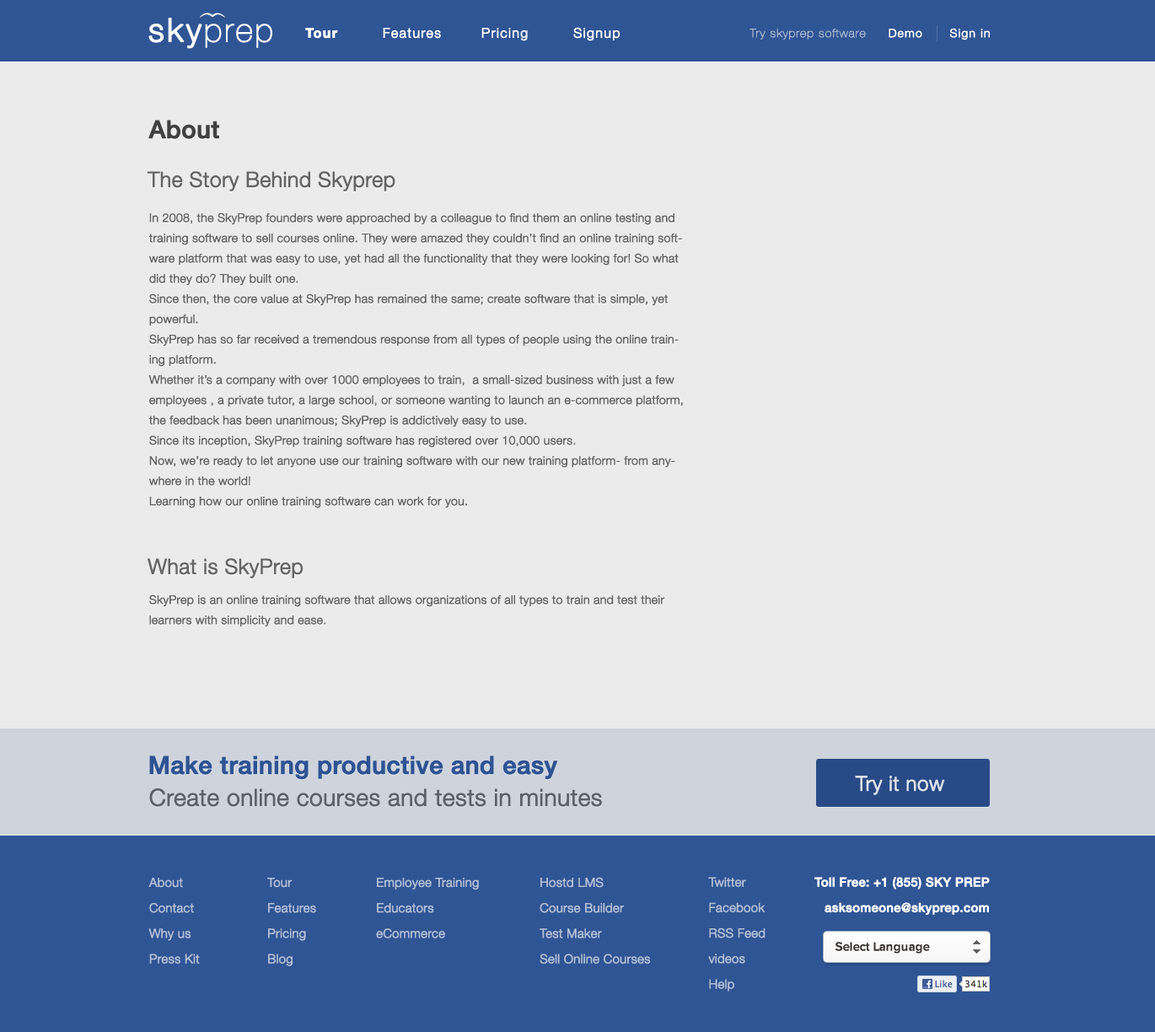
<style>
.page{position:relative;width:1155px;height:1032px;background:#ebebeb}
.page>*{position:absolute;margin:0}
.t1{font:32.8px "HelveticaNeue-UltraLight";letter-spacing:0.06em;color:#ffffff;font-weight:bold}
.t2{font:32.8px "HelveticaNeue-Light";letter-spacing:0.06em;color:#ffffff;font-weight:bold}
.t3{font:13.4px "HelveticaNeue-Light";letter-spacing:0.06em;color:#ffffff;font-weight:bold}
.t4{font:13.4px "HelveticaNeue-Bold";letter-spacing:0.06em;color:#ffffff;font-weight:bold}
.t5{font:11.5px "HelveticaNeue-UltraLight";letter-spacing:0.06em;color:#bac5d9;font-weight:bold}
.t6{font:11.5px "HelveticaNeue-Light";letter-spacing:0.06em;color:#ffffff;font-weight:bold}
.t7{font:24.5px "HelveticaNeue-Medium";color:#414141;font-weight:bold}
.t8{font:20.9px "HelveticaNeue-Light";color:#656565;font-weight:bold}
.t9{font:11.8px/20.2px "HelveticaNeue-Light";color:#656565;font-weight:bold}
.t10{font:24.5px "HelveticaNeue-Medium";color:#2e5393;font-weight:bold}
.t11{font:20.2px "HelveticaNeue-Light";color:#dfe4ed;font-weight:bold}
.t12{font:23.3px "HelveticaNeue-Light";color:#5c616a;font-weight:bold}
.t13{font:12.5px/25.5px "HelveticaNeue-Light";color:#b4c0d6;font-weight:bold}
.t14{font:12.5px/25.5px "HelveticaNeue-Medium";color:#ffffff;font-weight:bold}
.t15{font:12.6px "ProximaNova-Semibold";color:#404040}
</style>
<div class="page">
<p class="t1" style="left:148px;top:18px;width:124px;height:31px"><span class="t2">sky</span>prep</p>
<p class="t3" style="left:305px;top:27px;width:316px;height:14px"><span class="t4">Tour         </span>Features        Pricing         Signup</p>
<p class="t5" style="left:750px;top:29px;width:116px;height:11px">Try skyprep software</p>
<p class="t6" style="left:889px;top:28px;width:101px;height:12px">Demo Sign in</p>
<p class="t7" style="left:148px;top:120px;width:71px;height:19px">About</p>
<p class="t8" style="left:147px;top:171px;width:248px;height:20px">The Story Behind Skyprep</p>
<p class="t9" style="left:148px;top:213px;width:535px;height:295px">In 2008, the SkyPrep founders were approached by a colleague to find them an online testing and training software to sell courses online. They were amazed they couldn’t find an online training software platform that was easy to use, yet had all the functionality that they were looking for! So what did they do? They built one.<br>Since then, the core value at SkyPrep has remained the same; create software that is simple, yet powerful.<br>SkyPrep has so far received a tremendous response from all types of people using the online training platform.<br>Whether it’s a company with over 1000 employees to train,  a small-sized business with just a few employees , a private tutor, a large school, or someone wanting to launch an e-commerce platform, the feedback has been unanimous; SkyPrep is addictively easy to use.<br>Since its inception, SkyPrep training software has registered over 10,000 users.<br>Now, we’re ready to let anyone use our training software with our new training platform- from anywhere in the world!<br>Learning how our online training software can work for you.</p>
<p class="t8" style="left:148px;top:558px;width:156px;height:20px">What is SkyPrep</p>
<p class="t9" style="left:149px;top:595px;width:516px;height:32px">SkyPrep is an online training software that allows organizations of all types to train and test their learners with simplicity and ease.</p>
<p class="t10" style="left:149px;top:756px;width:409px;height:24px">Make training productive and easy</p>
<p class="t11" style="left:855px;top:776px;width:90px;height:19px">Try it now</p>
<p class="t12" style="left:149px;top:788px;width:453px;height:19px">Create online courses and tests in minutes</p>
<p class="t13" style="left:148px;top:878px;width:52px;height:86px">About<br>Contact<br>Why us<br>Press Kit</p>
<p class="t13" style="left:267px;top:878px;width:49px;height:88px">Tour<br>Features<br>Pricing<br>Blog</p>
<p class="t13" style="left:376px;top:878px;width:103px;height:61px">Employee Training<br>Educators<br>eCommerce</p>
<p class="t13" style="left:540px;top:877px;width:111px;height:87px">Hostd LMS<br>Course Builder<br>Test Maker<br>Sell Online Courses</p>
<p class="t13" style="left:708px;top:877px;width:58px;height:115px">Twitter<br>Facebook<br>RSS Feed<br>videos<br>Help</p>
<p class="t14" style="left:815px;top:877px;width:175px;height:38px;text-align:right">Toll Free: +1 (855) SKY PREP<br>asksomeone@skyprep.com</p>
<p class="t15" style="left:836px;top:942px;width:94px;height:12px">Select Language</p>
</div>
